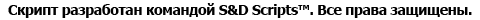
<style>
.page{position:relative;width:480px;height:20px;background:#ffffff}
.page>*{position:absolute;margin:0}
.t1{font:14px "Tahoma-Bold";letter-spacing:-0.025em;color:#000000}
</style>
<div class="page">
<p class="t1" style="left:8px;top:3px;width:464px;height:15px">Скрипт разработан командой S&amp;D Scripts™. Все права защищены.</p>
</div>
